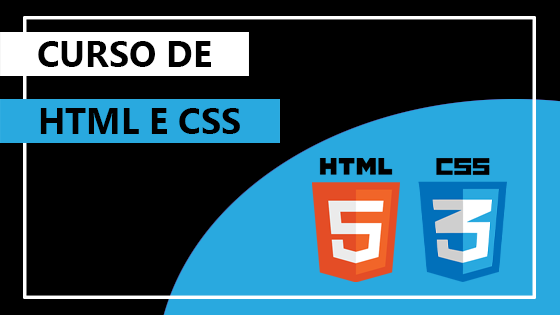
<style>
.page{position:relative;width:560px;height:315px;background:#000000}
.page>*{position:absolute;margin:0}
.t1{font:36px "SegoeUI-Bold";color:#000000}
</style>
<div class="page">
<p class="t1" style="left:38px;top:41px;width:173px;height:26px">CURSO DE</p>
<p class="t1" style="left:40px;top:108px;width:200px;height:26px">HTML E CSS</p>
</div>
